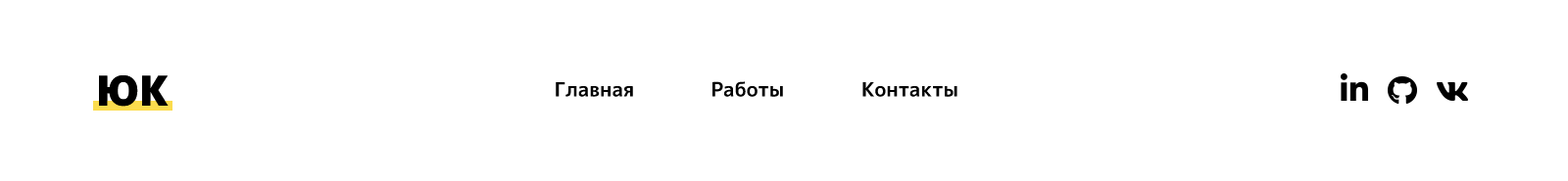
<style>
.page{position:relative;width:1568px;height:181px;background:#ffffff}
.page>*{position:absolute;margin:0}
.t1{font:41.2px "Mplus1p-Black";color:#000000}
.t2{font:19.6px "Mplus1p-Bold";color:#000000}
</style>
<div class="page">
<p class="t1" style="left:99px;top:75px;width:70px;height:32px">ЮК</p>
<p class="t2" style="left:556px;top:82px;width:77px;height:15px">Главная</p>
<p class="t2" style="left:712px;top:81px;width:71px;height:16px">Работы</p>
<p class="t2" style="left:862px;top:82px;width:95px;height:15px">Контакты</p>
</div>
